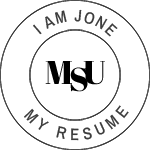
<style>
.page{position:relative;width:150px;height:150px;background:#ffffff}
.page>*{position:absolute;margin:0}
.t1{font:16.7px "ArchivoNarrow-Medium";letter-spacing:0.08em;color:#3d3d3d}
.t2{font:33.1px "AbrilFatface-Regular";letter-spacing:0.36em;color:#000000}
.t3{font:16.7px/24.5px "ArchivoNarrow-Medium";letter-spacing:0.3em;color:#3c3c3c}
</style>
<div class="page">
<p class="t1" style="left:33px;top:9px;width:85px;height:28px;rotate:37deg">I AM JONE</p>
<p class="t2" style="left:45px;top:61px;width:27px;height:23px">M</p>
<p class="t2" style="left:83px;top:61px;width:22px;height:24px">U</p>
<p class="t2" style="left:70px;top:67px;width:18px;height:25px">S</p>
<p class="t3" style="left:24px;top:105px;width:105px;height:36px;text-align:center">MY RESUME</p>
</div>
